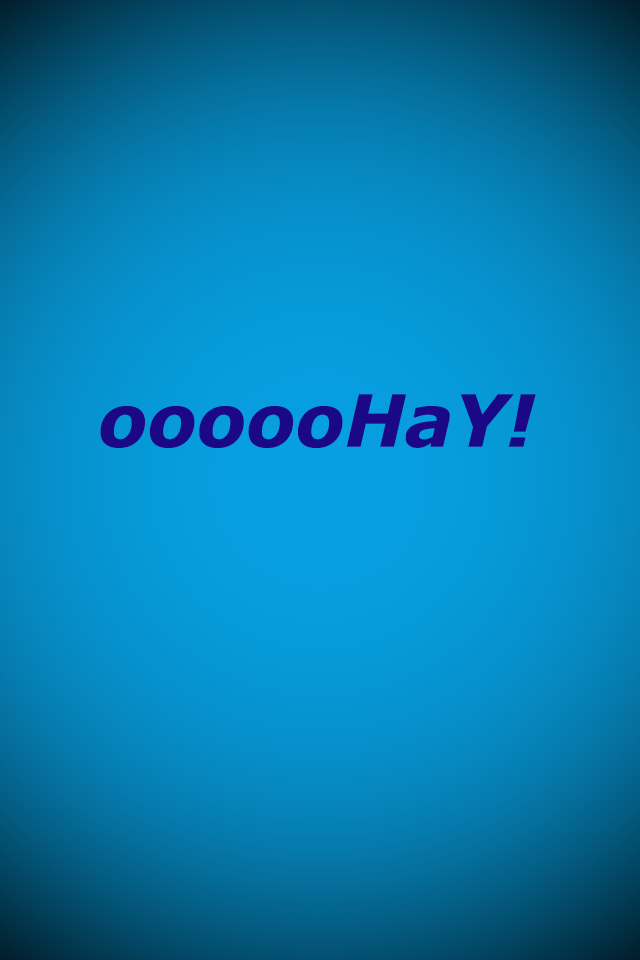
<style>
.page{position:relative;width:640px;height:960px}
.page>*{position:absolute;margin:0}
.t1{font:72px "Verdana-BoldItalic";color:#1a0887}
</style>
<div class="page">
<p class="t1" style="left:100px;top:394px;width:436px;height:54px">oooooHaY!</p>
</div>
